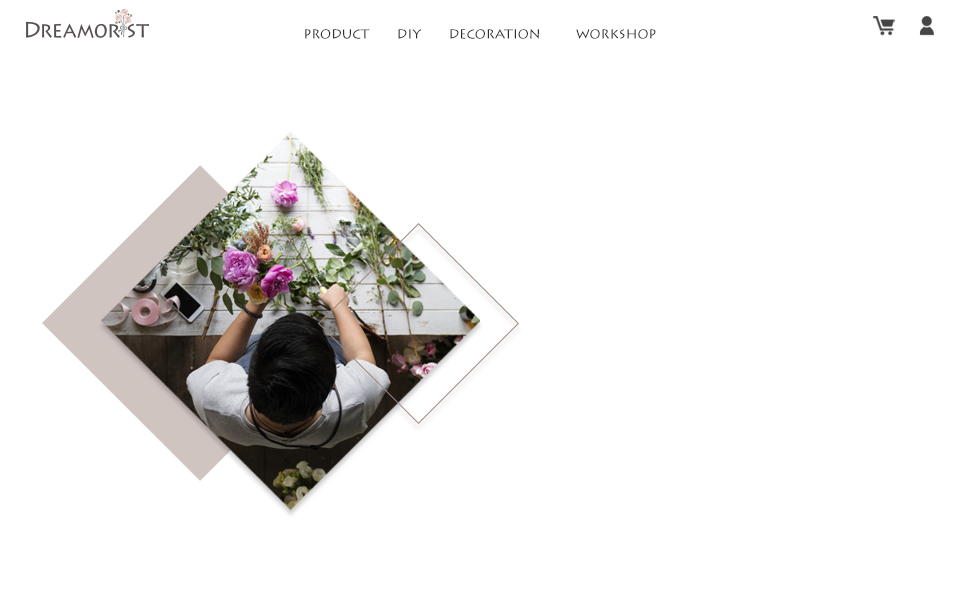
<style>
.page{position:relative;width:960px;height:600px;background:#ffffff}
.page>*{position:absolute;margin:0}
.t1{font:13px "LithosPro-Regular";color:#2e2e2e;text-transform:uppercase}
</style>
<div class="page">
<p class="t1" style="left:305px;top:28px;width:351px;height:11px">Product       DIY       Decoration         Workshop</p>
</div>
